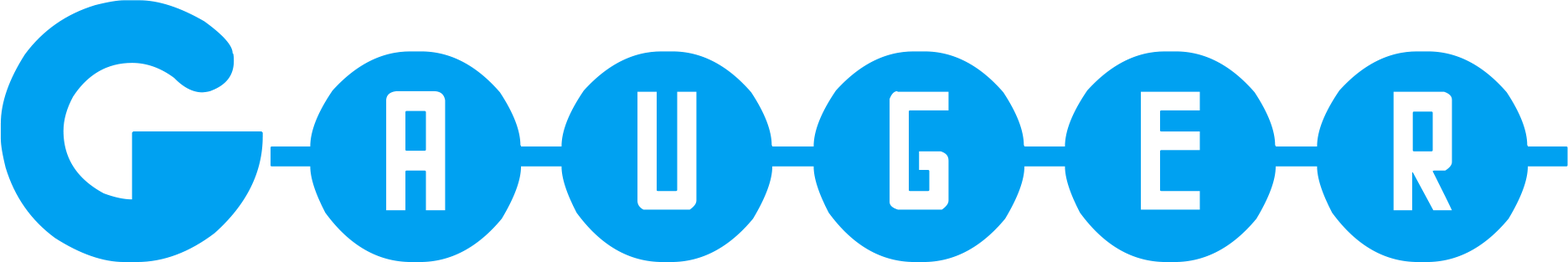
<style>
.page{position:relative;width:1568px;height:262px;background:#ffffff}
.page>*{position:absolute;margin:0}
.t1{font:308.2px "CoNcAdEnAdoSt";color:#00a1f1}
.t2{font:308.2px "HighLogic";color:#00a1f1}
</style>
<div class="page">
<p class="t1" style="left:0px;top:0px;width:1568px;height:262px"><span class="t2">G</span>auger</p>
</div>
